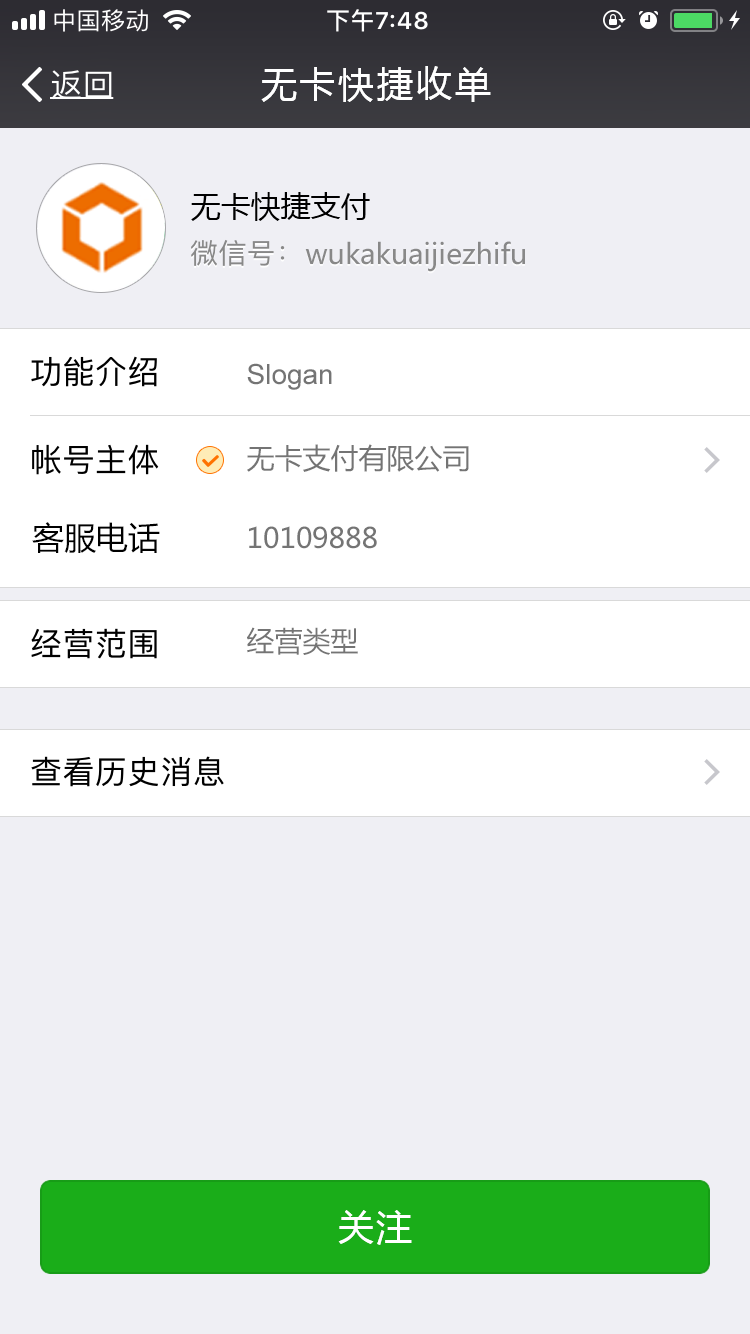
<style>
.page{position:relative;width:750px;height:1334px;background:#efeff4}
.page>*{position:absolute;margin:0}
.t1{font:36px "MicrosoftYaHei";letter-spacing:0.08em;color:#ffffff}
.t2{font:30px "MicrosoftYaHei";color:#000000}
.t3{font:28px "MicrosoftYaHei";color:#888888}
.t4{font:28px "ArialMT";color:#747474}
.t5{font:28px "MicrosoftYaHei";color:#747474}
.t6{font:32px "MicrosoftYaHei";color:#000000}
</style>
<div class="page">
<p class="t1" style="left:261px;top:66px;width:230px;height:36px">无卡快捷收单</p>
<p class="t2" style="left:191px;top:192px;width:179px;height:29px">无卡快捷支付</p>
<p class="t3" style="left:305px;top:241px;width:220px;height:31px">wukakuaijiezhifu</p>
<p class="t4" style="left:247px;top:363px;width:85px;height:27px">Slogan</p>
<p class="t5" style="left:247px;top:444px;width:222px;height:28px">无卡支付有限公司</p>
<p class="t6" style="left:32px;top:522px;width:128px;height:31px">客服电话</p>
<p class="t5" style="left:249px;top:526px;width:128px;height:23px">10109888</p>
<p class="t5" style="left:247px;top:627px;width:111px;height:28px">经营类型</p>
<p class="t1" style="left:338px;top:1210px;width:74px;height:35px">关注</p>
</div>
